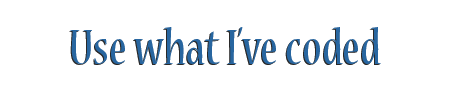
<style>
.page{position:relative;width:450px;height:99px;background:#ffffff}
.page>*{position:absolute;margin:0}
.t1{font:55px "NuevaStd-Cond";color:#2866a0}
</style>
<div class="page">
<p class="t1" style="left:70px;top:27px;width:311px;height:37px">Use what I’ve coded</p>
<p class="t1" style="left:70px;top:27px;width:311px;height:37px">Use what I’ve coded</p>
</div>
